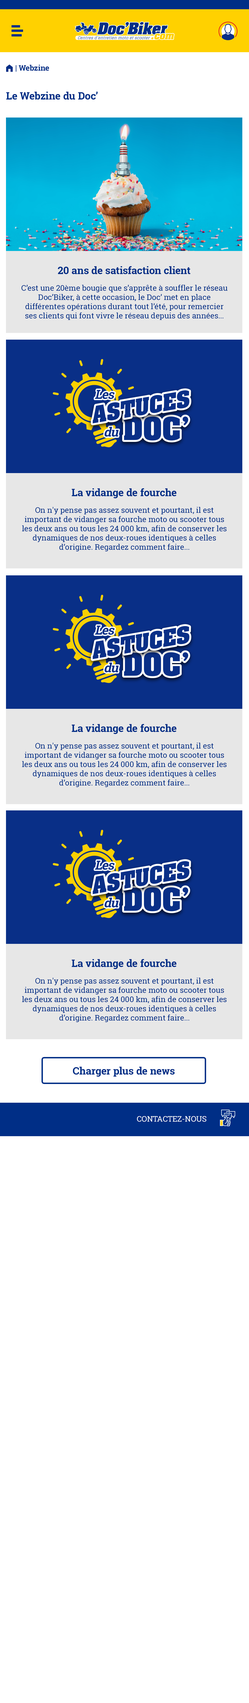
<style>
.page{position:relative;width:249px;height:1703px;background:#ffffff}
.page>*{position:absolute;margin:0}
.t1{font:7.7px "RobotoSlab-Bold";color:#002e86}
.t2{font:7.7px "FoundationIconsGeneral-Reg";color:#002e86}
.t3{font:10.3px "RobotoSlab-Bold";color:#002e86}
.t4{font:7.7px "RobotoSlab-Regular";color:#002e86}
.t5{font:7.7px "RobotoSlab-Regular";color:#ffffff;text-transform:uppercase}
</style>
<div class="page">
<p class="t1" style="left:6px;top:64px;width:43px;height:8px"><span class="t2">m </span>| Webzine</p>
<p class="t3" style="left:6px;top:92px;width:92px;height:8px">Le Webzine du Doc’</p>
<p class="t3" style="left:58px;top:266px;width:133px;height:8px">20 ans de satisfaction client</p>
<p class="t4" style="left:21px;top:285px;width:207px;height:35px;text-align:center">C’est une 20ème bougie que s’apprête à souffler le réseau Doc’Biker, à cette occasion, le Doc’ met en place différentes opérations durant tout l’été, pour remercier ses clients qui font vivre le réseau depuis des années...</p>
<p class="t3" style="left:72px;top:488px;width:105px;height:10px">La vidange de fourche</p>
<p class="t4" style="left:22px;top:507px;width:205px;height:44px;text-align:center">On n'y pense pas assez souvent et pourtant, il est important de vidanger sa fourche moto ou scooter tous les deux ans ou tous les 24 000 km, afin de conserver les dynamiques de nos deux-roues identiques à celles d’origine. Regardez comment faire...</p>
<p class="t3" style="left:72px;top:724px;width:105px;height:10px">La vidange de fourche</p>
<p class="t4" style="left:22px;top:742px;width:205px;height:45px;text-align:center">On n'y pense pas assez souvent et pourtant, il est important de vidanger sa fourche moto ou scooter tous les deux ans ou tous les 24 000 km, afin de conserver les dynamiques de nos deux-roues identiques à celles d’origine. Regardez comment faire...</p>
<p class="t3" style="left:72px;top:959px;width:105px;height:10px">La vidange de fourche</p>
<p class="t4" style="left:22px;top:977px;width:205px;height:45px;text-align:center">On n'y pense pas assez souvent et pourtant, il est important de vidanger sa fourche moto ou scooter tous les deux ans ou tous les 24 000 km, afin de conserver les dynamiques de nos deux-roues identiques à celles d’origine. Regardez comment faire...</p>
<p class="t3" style="left:73px;top:1067px;width:102px;height:10px">Charger plus de news</p>
<p class="t5" style="left:137px;top:1116px;width:70px;height:6px">contactez-nous</p>
</div>
